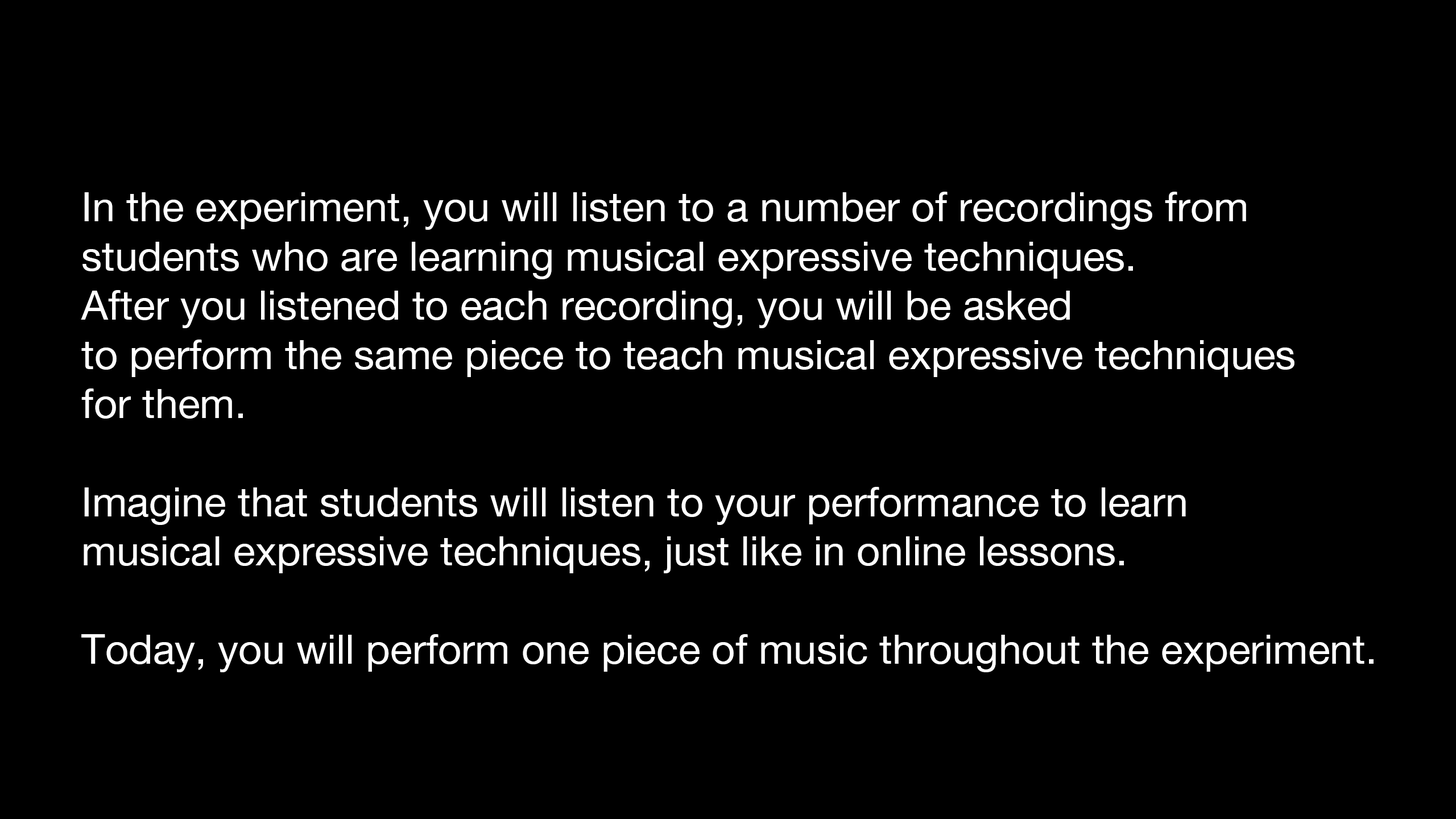
<style>
.page{position:relative;width:1456px;height:819px;background:#000000}
.page>*{position:absolute;margin:0}
.t1{font:40.9px "HelveticaNeue";color:#ffffff}
</style>
<div class="page">
<p class="t1" style="left:81px;top:192px;width:1293px;height:480px">In the experiment, you will listen to a number of recordings from<br>students who are learning musical expressive techniques.<br>After you listened to each recording, you will be asked<br>to perform the same piece to teach musical expressive techniques<br>for them.<br><br>Imagine that students will listen to your performance to learn<br>musical expressive techniques, just like in online lessons.<br><br>Today, you will perform one piece of music throughout the experiment.</p>
</div>
